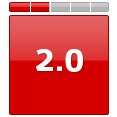
<style>
.page{position:relative;width:117px;height:117px;background:#d40000}
.page>*{position:absolute;margin:0}
.t1{font:36px "Colaborate-Bold";color:#ffffff;text-transform:uppercase}
</style>
<div class="page">
<p class="t1" style="left:35px;top:49px;width:48px;height:23px">2.0</p>
</div>
